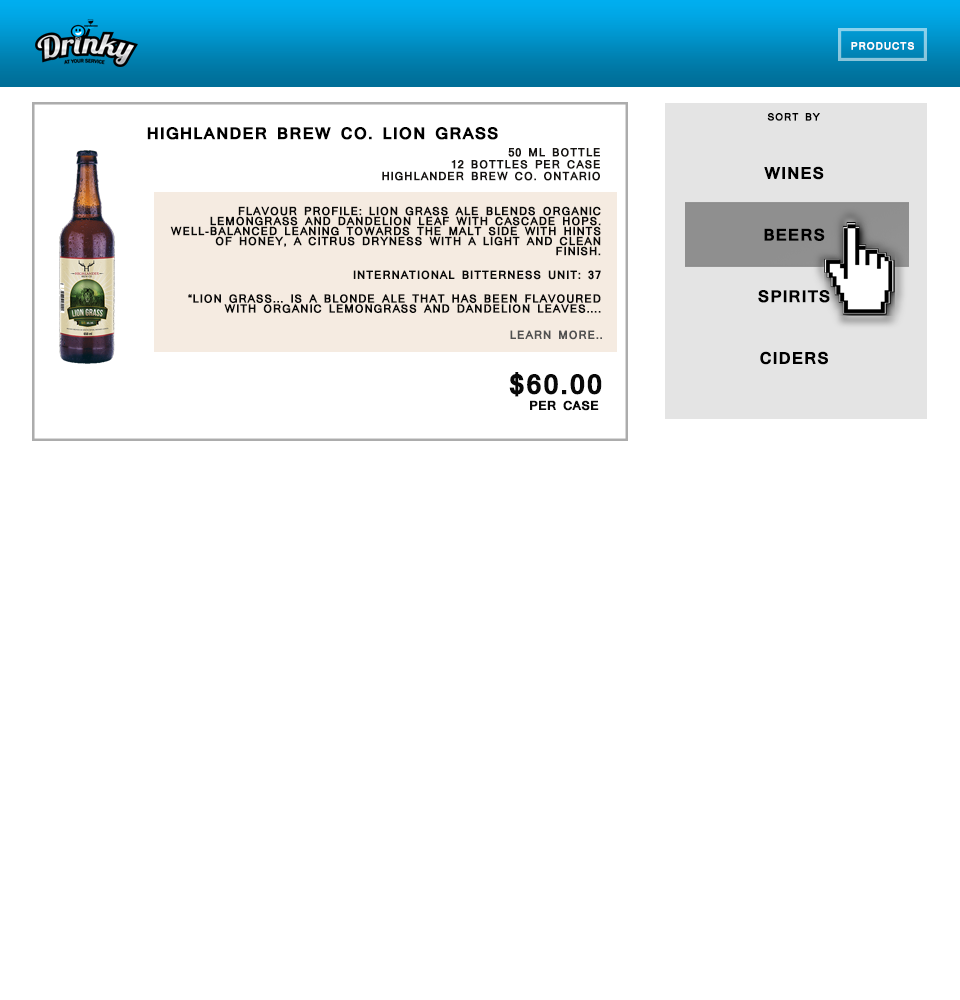
<style>
.page{position:relative;width:960px;height:1000px;background:#ffffff}
.page>*{position:absolute;margin:0}
.t1{font:10px "Mangal-Bold";letter-spacing:0.03em;color:#ffffff;text-transform:uppercase;font-weight:bold}
.t2{font:10px "Mangal-Bold";letter-spacing:0.03em;color:#000000;text-transform:uppercase;font-weight:bold}
.t3{font:11px/10px "Mangal-Bold";letter-spacing:0.03em;color:#161311;text-transform:uppercase;font-weight:bold}
.t4{font:16px/29px "Mangal-Bold";letter-spacing:0.03em;color:#000000;text-transform:uppercase;font-weight:bold}
.t5{font:16px/0px "Mangal-Bold";letter-spacing:0.03em;color:#000000;text-transform:uppercase;font-weight:bold}
.t6{font:11px/10px "Mangal-Bold";letter-spacing:0.03em;color:#080808;text-transform:uppercase;font-weight:bold}
.t7{font:11px "Mangal-Bold";letter-spacing:0.03em;color:#515151;text-transform:uppercase;font-weight:bold}
.t8{font:27px "Mangal-Bold";letter-spacing:0.03em;color:#080808;text-transform:uppercase;font-weight:bold}
.t9{font:12px "Mangal-Bold";color:#080808;text-transform:uppercase;font-weight:bold}
</style>
<div class="page">
<p class="t1" style="left:851px;top:42px;width:63px;height:8px">products</p>
<p class="t2" style="left:767px;top:113px;width:53px;height:8px">Sort By</p>
<p class="t3" style="left:147px;top:127px;width:453px;height:54px;text-align:center"><span class="t4"><br></span><span class="t5">Highlander Brew Co. Lion Grass<br><br><br><br></span>50 ml bottle<br>12 Bottles Per Case<br>Highlander Brew Co. Ontario</p>
<p class="t4" style="left:758px;top:166px;width:72px;height:199px;text-align:center">wines<br><br>beers<br><br>spirits<br><br>ciders</p>
<p class="t6" style="left:170px;top:206px;width:431px;height:107px;text-align:right">Flavour Profile: Lion Grass Ale blends organic lemongrass and dandelion leaf with Cascade hops. Well-balanced leaning towards the malt side with hints of honey, a citrus dryness with a light and clean finish.<br><br>International Bitterness Unit: 37<br><br>“Lion Grass... is a blonde ale that has been flavoured with organic lemongrass and dandelion leaves....</p>
<p class="t7" style="left:510px;top:330px;width:92px;height:10px">learn more..</p>
<p class="t8" style="left:509px;top:372px;width:93px;height:25px">$60.00</p>
<p class="t9" style="left:530px;top:400px;width:69px;height:11px">per case</p>
</div>
